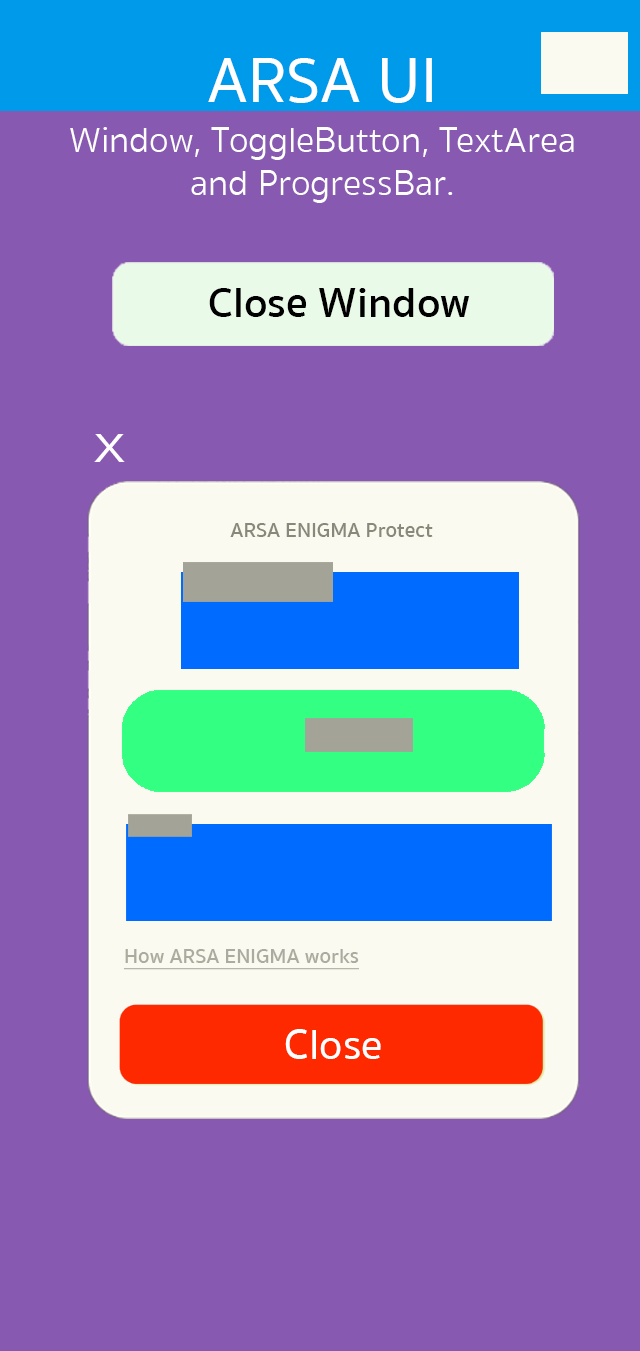
<style>
.page{position:relative;width:640px;height:1351px;background:#8859b1}
.page>*{position:absolute;margin:0}
.t1{font:65.3px "SukhumvitSet-Medium";color:#ffffff}
.t2{font:36.1px "SukhumvitSet-Light";color:#ffffff}
.t3{font:41.2px "SukhumvitSet-Medium";color:#ffffff;scale:1.28 1}
.t4{font:21.1px "SukhumvitSet-SemiBold";color:#88897b}
.t5{font:21.1px "SukhumvitSet-SemiBold";color:#abab9f;text-decoration:underline}
.t6{font:43.1px "SukhumvitSet-Medium";color:#ffffff}
</style>
<div class="page">
<p class="t1" style="left:208px;top:58px;width:224px;height:45px">ARSA UI</p>
<p class="t2" style="left:70px;top:127px;width:504px;height:76px;text-align:center">Window, ToggleButton, TextArea<br>and ProgressBar.</p>
<p class="t3" style="left:94px;top:434px;width:31px;height:28px">X</p>
<p class="t4" style="left:230px;top:523px;width:203px;height:14px">ARSA ENIGMA Protect</p>
<p class="t5" style="left:123px;top:949px;width:236px;height:21px">How ARSA ENIGMA works</p>
<p class="t6" style="left:285px;top:1029px;width:96px;height:30px">Close</p>
</div>
